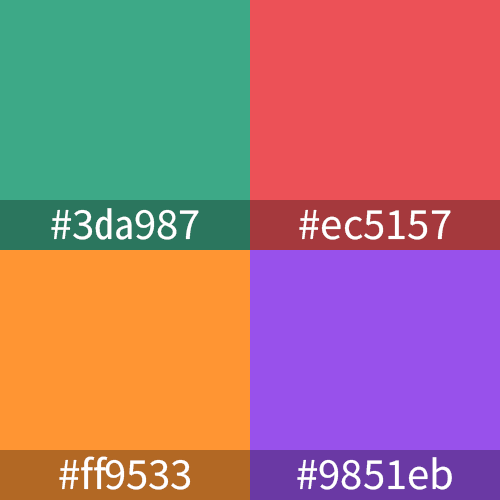
<style>
.page{position:relative;width:500px;height:500px;background:#ff9533}
.page>*{position:absolute;margin:0}
.t1{font:40px "NotoSansKR-Regular";color:#ffffff}
</style>
<div class="page">
<p class="t1" style="left:51px;top:208px;width:148px;height:32px">#3da987</p>
<p class="t1" style="left:299px;top:209px;width:152px;height:31px">#ec5157</p>
<p class="t1" style="left:59px;top:456px;width:132px;height:34px">#ff9533</p>
<p class="t1" style="left:297px;top:457px;width:155px;height:33px">#9851eb</p>
</div>
